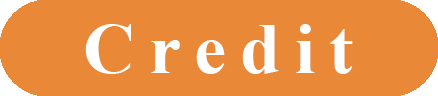
<style>
.page{position:relative;width:438px;height:96px;background:#e98837}
.page>*{position:absolute;margin:0}
.t1{font:72px "TimesNewRomanPS-BoldMT";letter-spacing:0.2em;color:#ffffff}
</style>
<div class="page">
<p class="t1" style="left:85px;top:24px;width:268px;height:50px">Credit</p>
</div>
